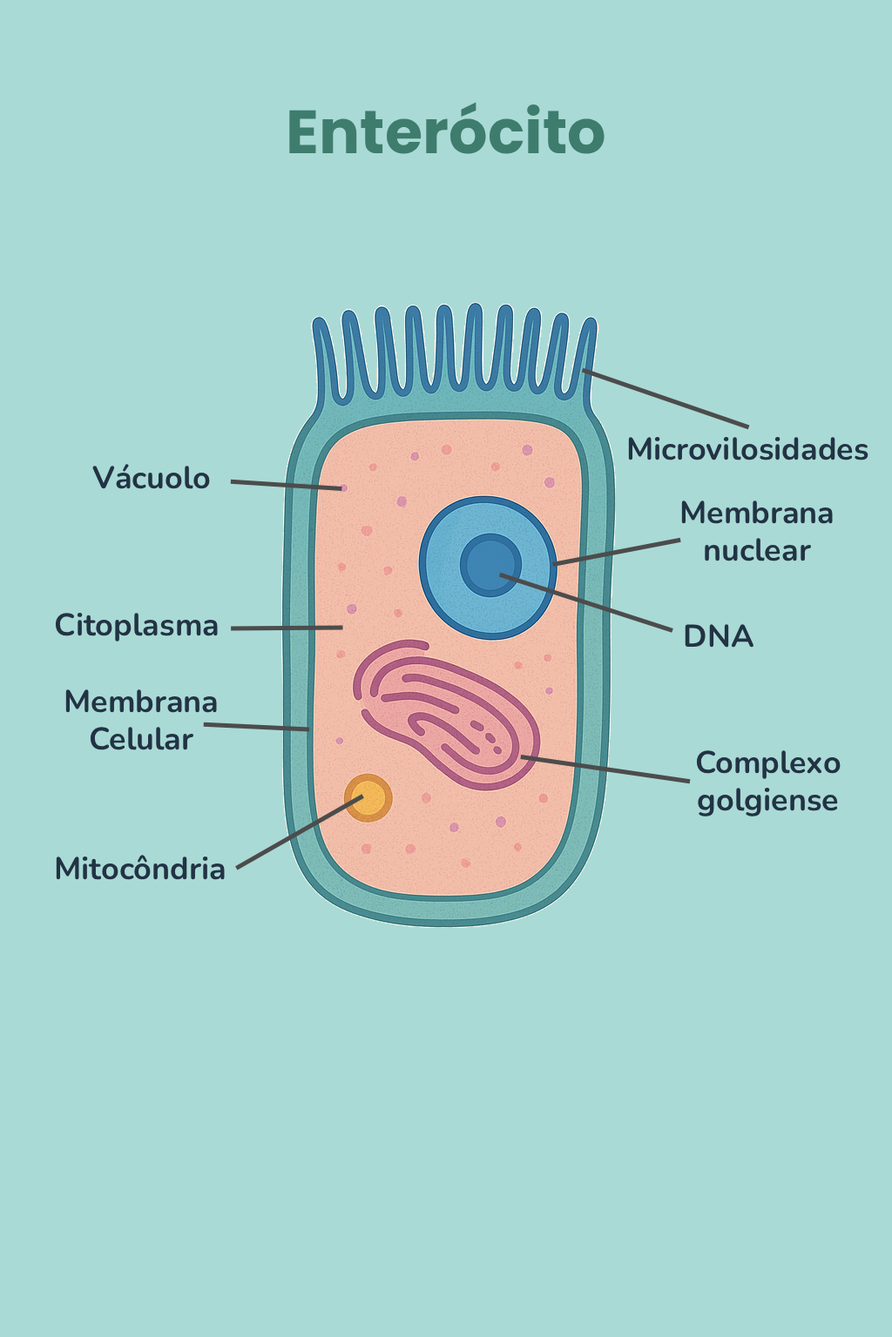
<style>
.page{position:relative;width:892px;height:1337px;background:#aadad6}
.page>*{position:absolute;margin:0}
.t1{font:60.9px "Poppins-Bold";color:#3e7c6d}
.t2{font:31.3px "Nunito-Bold";color:#223344}
</style>
<div class="page">
<p class="t1" style="left:289px;top:102px;width:315px;height:52px">Enterócito</p>
<p class="t2" style="left:628px;top:437px;width:240px;height:24px">Microvilosidades</p>
<p class="t2" style="left:92px;top:464px;width:118px;height:25px">Vácuolo</p>
<p class="t2" style="left:681px;top:501px;width:151px;height:61px;text-align:center">Membrana nuclear</p>
<p class="t2" style="left:55px;top:613px;width:163px;height:29px">Citoplasma</p>
<p class="t2" style="left:684px;top:624px;width:70px;height:24px">DNA</p>
<p class="t2" style="left:65px;top:690px;width:152px;height:61px;text-align:center">Membrana Celular</p>
<p class="t2" style="left:696px;top:751px;width:144px;height:66px;text-align:center">Complexo golgiense</p>
<p class="t2" style="left:56px;top:855px;width:169px;height:25px">Mitocôndria</p>
</div>
